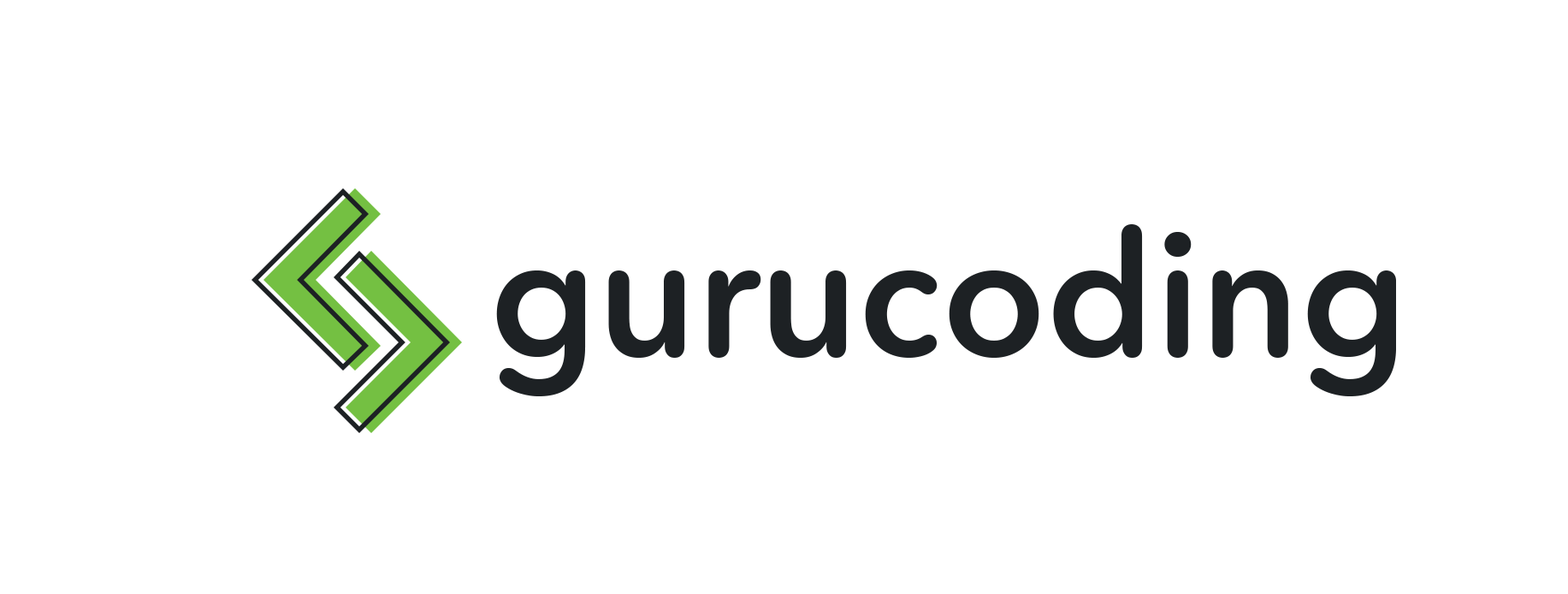
<style>
.page{position:relative;width:1568px;height:594px;background:#ffffff}
.page>*{position:absolute;margin:0}
.t1{font:171.1px "AvenirNextRoundedW01-Demi";color:#1d2124}
</style>
<div class="page">
<p class="t1" style="left:496px;top:224px;width:900px;height:172px">gurucoding</p>
</div>
